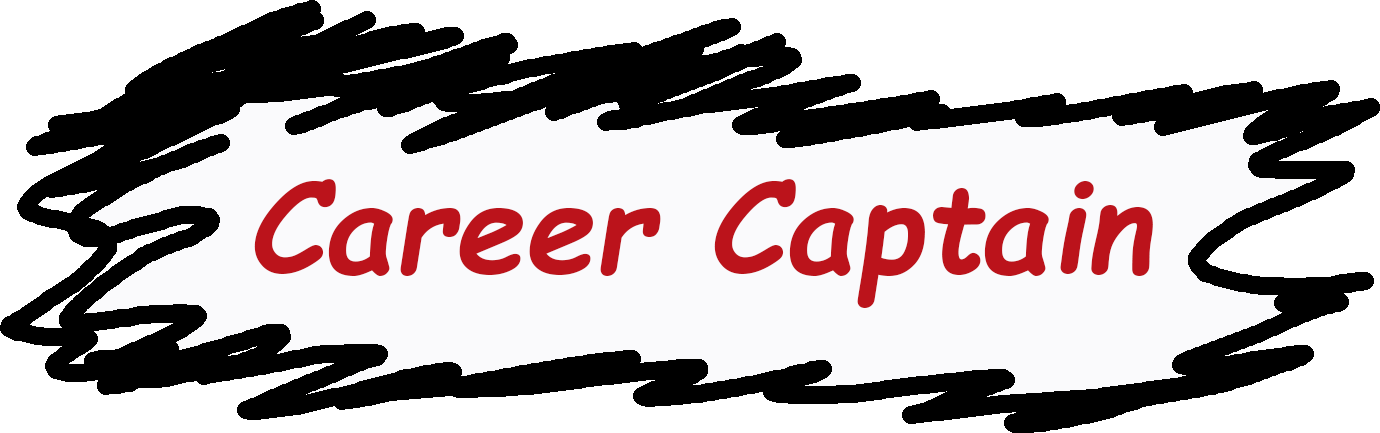
<style>
.page{position:relative;width:1380px;height:433px;background:#fafafc}
.page>*{position:absolute;margin:0}
.t1{font:125px "ComicSansMS-BoldItalic";color:#bb131b}
</style>
<div class="page">
<p class="t1" style="left:254px;top:179px;width:899px;height:129px">Career Captain</p>
</div>
